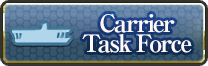
<style>
.page{position:relative;width:208px;height:66px}
.page>*{position:absolute;margin:0}
.t1{font:24px/20px "RyuminPro-ExBold";letter-spacing:-0.08em;color:#fff9f9}
</style>
<div class="page">
<p class="t1" style="left:82px;top:14px;width:110px;height:39px;text-align:center">Carrier<br>Task Force</p>
</div>
